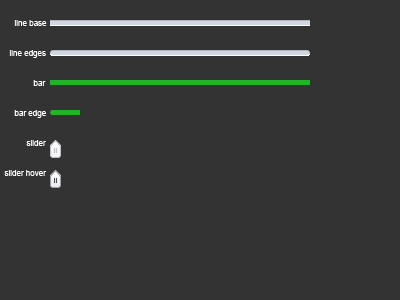
<style>
.page{position:relative;width:400px;height:300px;background:#333333}
.page>*{position:absolute;margin:0}
.t1{font:8px "ArialMT";color:#ffffff}
</style>
<div class="page">
<p class="t1" style="left:14px;top:20px;width:33px;height:6px">line base</p>
<p class="t1" style="left:9px;top:50px;width:37px;height:8px">line edges</p>
<p class="t1" style="left:33px;top:80px;width:13px;height:6px">bar</p>
<p class="t1" style="left:14px;top:110px;width:32px;height:8px">bar edge</p>
<p class="t1" style="left:26px;top:140px;width:20px;height:6px">slider</p>
<p class="t1" style="left:4px;top:170px;width:43px;height:6px">slider hover</p>
</div>
